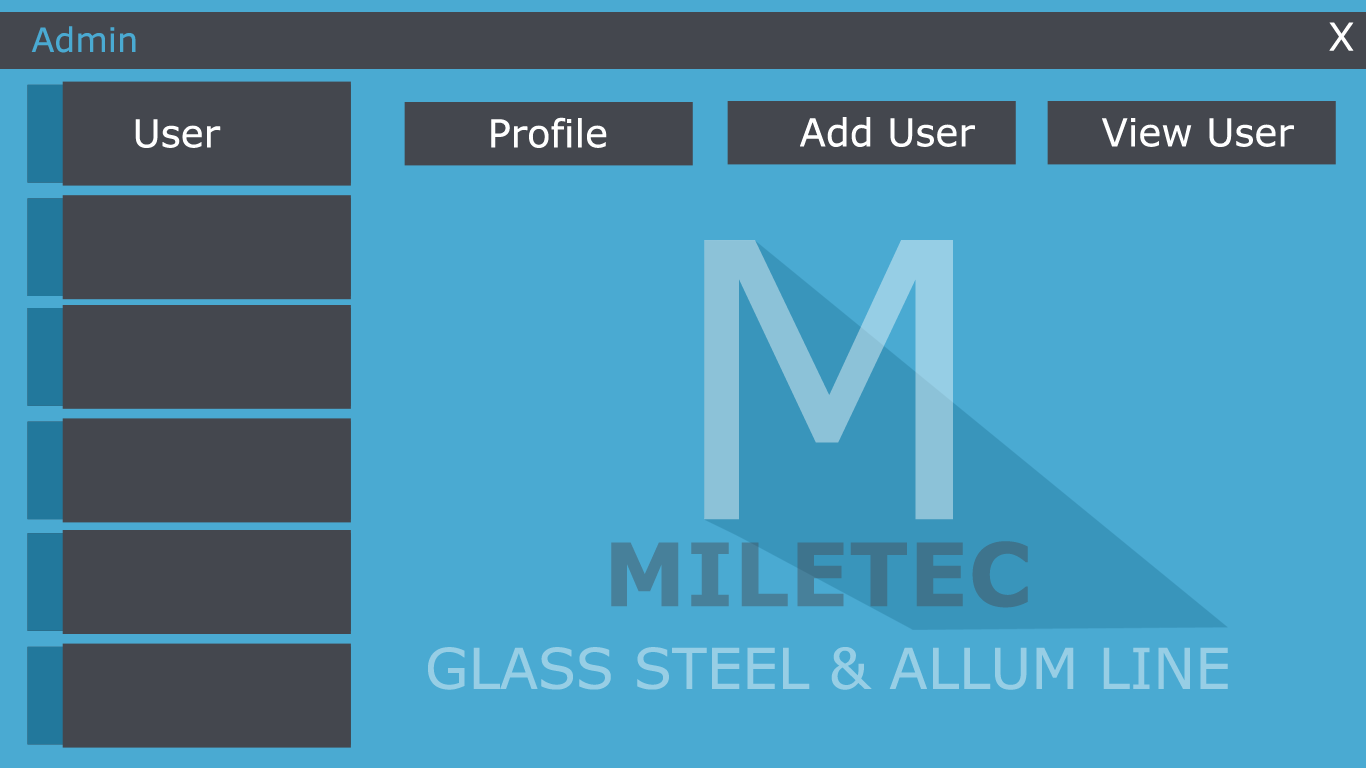
<style>
.page{position:relative;width:1366px;height:768px;background:#4aaad2}
.page>*{position:absolute;margin:0}
.t1{font:33.5px "Verdana";color:#4aaad2}
.t2{font:38.3px "Verdana";color:#ffffff}
.t3{font:38.4px "Verdana";color:#ffffff}
.t4{font:383.8px "Verdana";color:#8cc2d8}
.t5{font:87.3px "Verdana-Bold";color:#47809a}
.t6{font:56.1px "Verdana";color:#97cee5}
</style>
<div class="page">
<p class="t1" style="left:31px;top:26px;width:105px;height:27px">Admin</p>
<p class="t2" style="left:1329px;top:22px;width:25px;height:29px">X</p>
<p class="t3" style="left:135px;top:119px;width:86px;height:29px">User</p>
<p class="t3" style="left:491px;top:117px;width:116px;height:31px">Profile</p>
<p class="t3" style="left:800px;top:117px;width:175px;height:30px">Add User</p>
<p class="t3" style="left:1102px;top:118px;width:192px;height:29px">View User</p>
<p class="t4" style="left:704px;top:240px;width:249px;height:280px">M</p>
<p class="t5" style="left:611px;top:541px;width:417px;height:67px">MILETEC</p>
<p class="t6" style="left:428px;top:647px;width:800px;height:43px">GLASS STEEL &amp; ALLUM LINE</p>
</div>
